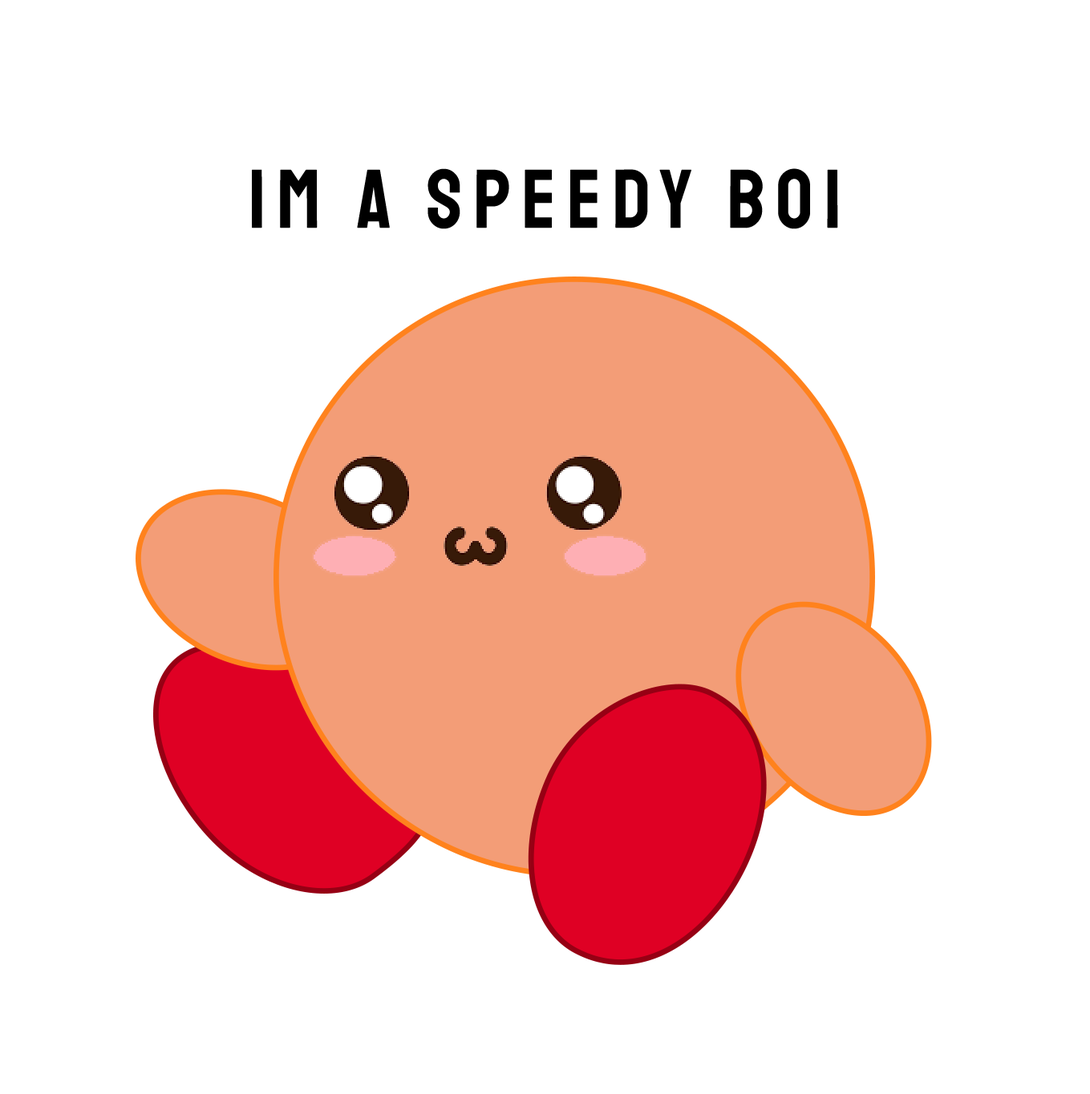
<style>
.page{position:relative;width:1090px;height:1094px;background:#ffffff}
.page>*{position:absolute;margin:0}
.t1{font:83.4px "Staatliches-Regular";letter-spacing:0.14em;color:#000000;scale:0.97 1}
</style>
<div class="page">
<p class="t1" style="left:252px;top:168px;width:586px;height:61px">IM A SPEEDY BOI</p>
</div>
